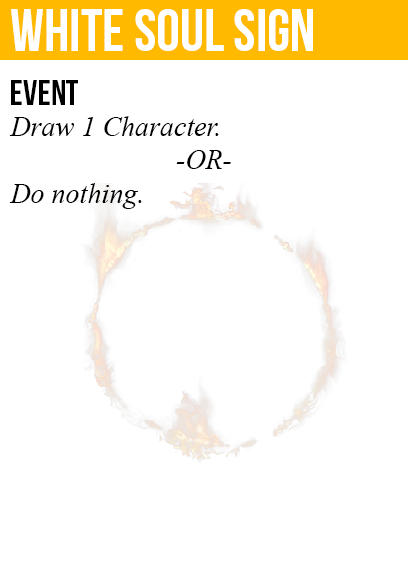
<style>
.page{position:relative;width:408px;height:585px;background:#ffffff}
.page>*{position:absolute;margin:0}
.t1{font:60px "BebasNeue";color:#ffffff}
.t2{font:36px "BebasNeue";color:#000000}
.t3{font:28px "TimesNewRomanPS-ItalicMT";color:#000000}
</style>
<div class="page">
<p class="t1" style="left:11px;top:9px;width:302px;height:42px">white soul sign</p>
<p class="t2" style="left:11px;top:80px;width:67px;height:25px">event</p>
<p class="t3" style="left:9px;top:116px;width:210px;height:93px">Draw 1 Character.<br><br>Do nothing.</p>
<p class="t3" style="left:176px;top:150px;width:55px;height:19px">-OR-</p>
</div>
